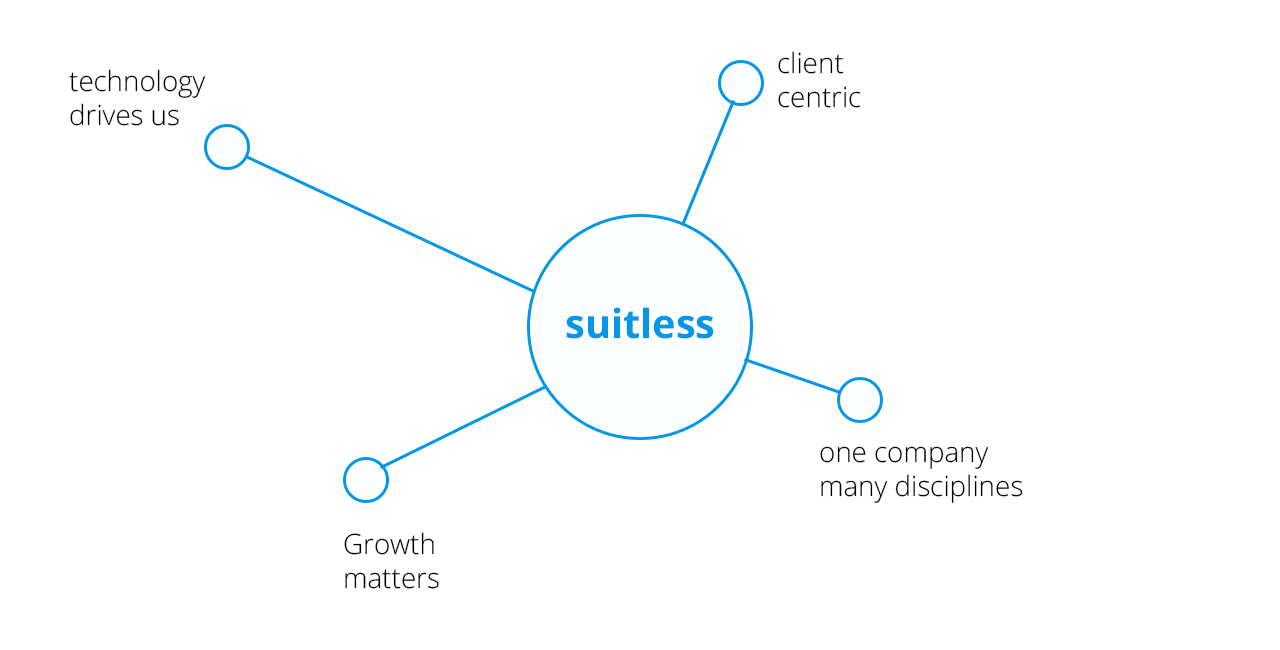
<style>
.page{position:relative;width:1280px;height:650px;background:#ffffff}
.page>*{position:absolute;margin:0}
.t1{font:28px "OpenSans-Light";color:#000000}
.t2{font:40px "OpenSans-Bold";color:#0497e7}
</style>
<div class="page">
<p class="t1" style="left:778px;top:51px;width:83px;height:57px">client<br>centric</p>
<p class="t1" style="left:69px;top:69px;width:137px;height:57px">technology <br>drives us</p>
<p class="t2" style="left:566px;top:307px;width:148px;height:32px">suitless</p>
<p class="t1" style="left:820px;top:446px;width:203px;height:57px">one company<br>many disciplines</p>
<p class="t1" style="left:344px;top:532px;width:95px;height:57px">Growth<br>matters</p>
</div>
